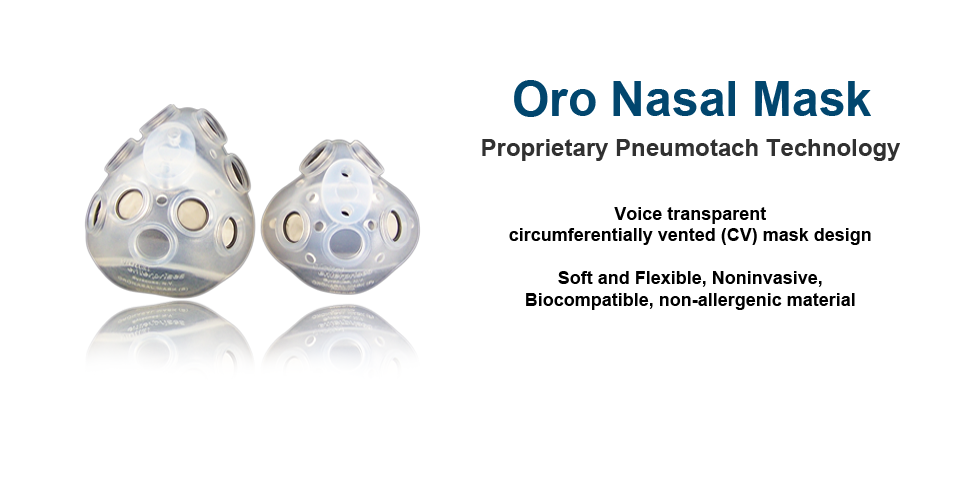
<style>
.page{position:relative;width:960px;height:479px;background:#ffffff}
.page>*{position:absolute;margin:0}
.t1{font:48px "Arial-BoldMT";color:#01466e}
.t2{font:24px "Arial-BoldMT";color:#313131}
.t3{font:18px "Arial-BoldMT";color:#000000}
</style>
<div class="page">
<p class="t1" style="left:514px;top:80px;width:357px;height:37px">Oro Nasal Mask</p>
<p class="t2" style="left:482px;top:139px;width:418px;height:22px">Proprietary Pneumotach Technology</p>
<p class="t3" style="left:509px;top:207px;width:362px;height:103px;text-align:center">Voice transparent<br>circumferentially vented (CV) mask design<br><br>Soft and Flexible, Noninvasive,<br>Biocompatible, non-allergenic material</p>
</div>
